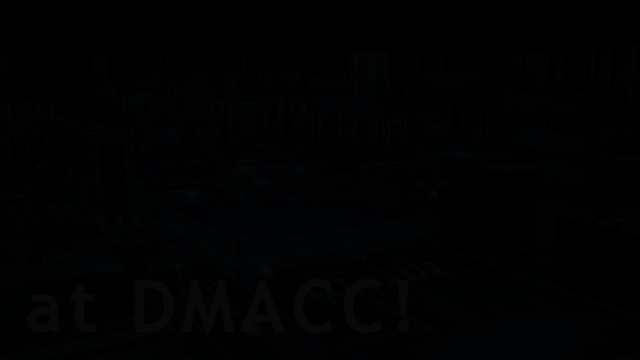
<style>
.page{position:relative;width:640px;height:360px;background:#000000}
.page>*{position:absolute;margin:0}
.t1{font:72px "TrebuchetMS-Bold";letter-spacing:0.075em;color:#080808}
</style>
<div class="page">
<p class="t1" style="left:27px;top:279px;width:383px;height:54px">at DMACC!</p>
</div>
